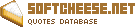
<style>
.page{position:relative;width:135px;height:27px;background:#ffffff}
.page>*{position:absolute;margin:0}
.t1{font:8px "04b03";color:#7b5229}
.t2{font:14px "04b19";color:#a57331}
</style>
<div class="page">
<p class="t1" style="left:28px;top:3px;width:107px;height:22px"><span class="t2">sOFTCHEESE.NET<br></span>QUOTES DATABASE</p>
</div>
